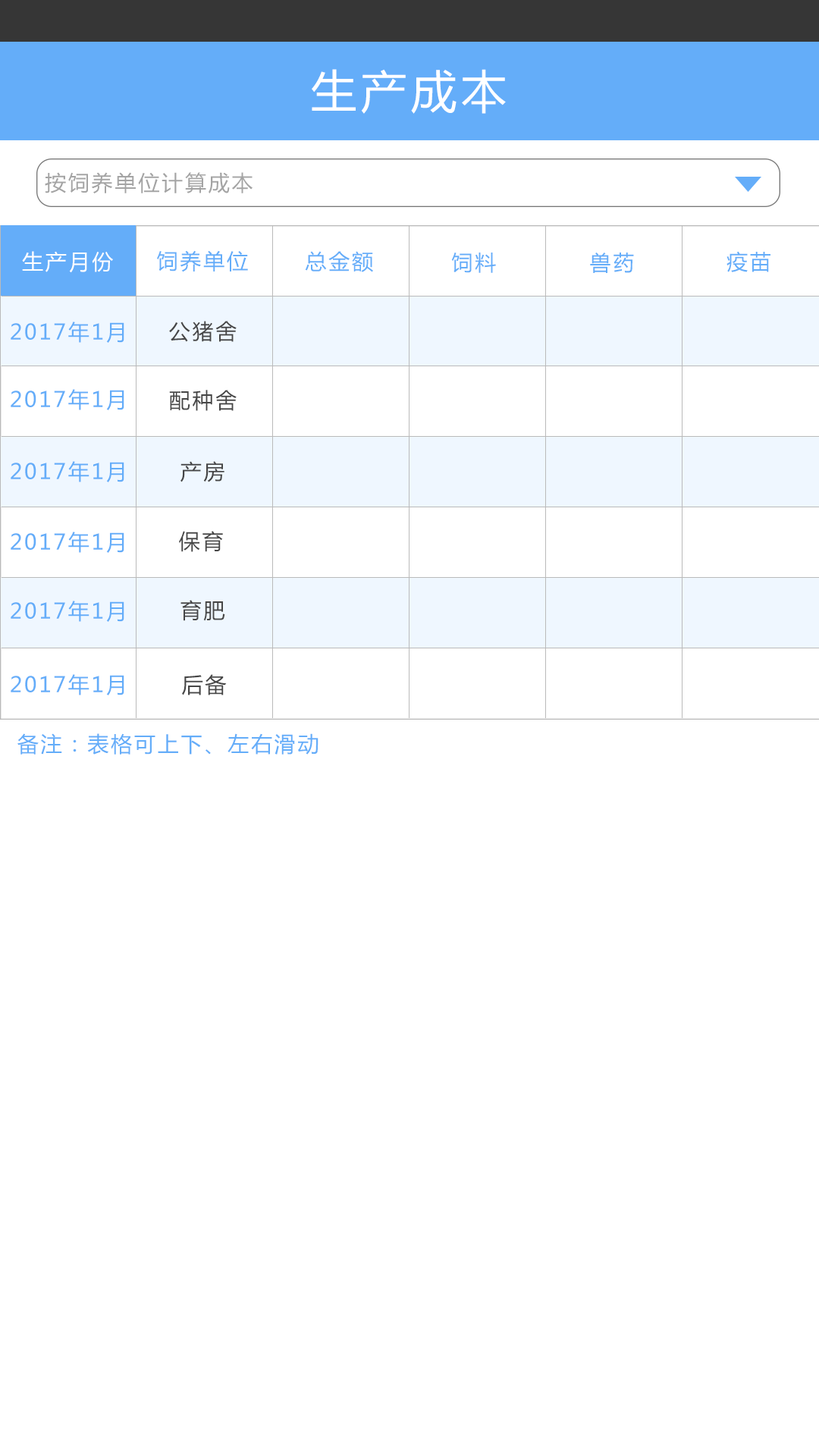
<style>
.page{position:relative;width:819px;height:1456px;background:#ffffff}
.page>*{position:absolute;margin:0}
.t1{font:45.5px "MicrosoftYaHei";letter-spacing:0.1em;color:#ffffff}
.t2{font:21.2px "MicrosoftYaHei";letter-spacing:0.1em;color:#a4a4a4}
.t3{font:21.2px "MicrosoftYaHei";letter-spacing:0.1em;color:#ffffff}
.t4{font:21.2px "MicrosoftYaHei";letter-spacing:0.1em;color:#64adf9}
.t5{font:21.2px "MicrosoftYaHei";letter-spacing:0.1em;color:#464646}
</style>
<div class="page">
<p class="t1" style="left:312px;top:69px;width:194px;height:45px">生产成本</p>
<p class="t2" style="left:45px;top:172px;width:208px;height:21px">按饲养单位计算成本</p>
<p class="t3" style="left:22px;top:251px;width:91px;height:22px">生产月份</p>
<p class="t4" style="left:157px;top:250px;width:91px;height:22px">饲养单位</p>
<p class="t4" style="left:305px;top:251px;width:68px;height:21px">总金额</p>
<p class="t4" style="left:451px;top:253px;width:45px;height:20px">饲料</p>
<p class="t4" style="left:590px;top:253px;width:44px;height:20px">兽药</p>
<p class="t4" style="left:726px;top:251px;width:44px;height:21px">疫苗</p>
<p class="t4" style="left:11px;top:322px;width:113px;height:21px">2017年1月</p>
<p class="t5" style="left:169px;top:321px;width:68px;height:21px">公猪舍</p>
<p class="t4" style="left:11px;top:389px;width:113px;height:21px">2017年1月</p>
<p class="t5" style="left:169px;top:390px;width:68px;height:21px">配种舍</p>
<p class="t4" style="left:11px;top:461px;width:113px;height:21px">2017年1月</p>
<p class="t5" style="left:180px;top:461px;width:44px;height:21px">产房</p>
<p class="t4" style="left:11px;top:532px;width:113px;height:21px">2017年1月</p>
<p class="t5" style="left:179px;top:531px;width:44px;height:21px">保育</p>
<p class="t4" style="left:11px;top:601px;width:113px;height:21px">2017年1月</p>
<p class="t5" style="left:180px;top:600px;width:45px;height:21px">育肥</p>
<p class="t4" style="left:11px;top:674px;width:113px;height:21px">2017年1月</p>
<p class="t5" style="left:182px;top:674px;width:45px;height:21px">后备</p>
<p class="t4" style="left:17px;top:733px;width:301px;height:22px">备注：表格可上下、左右滑动</p>
</div>
